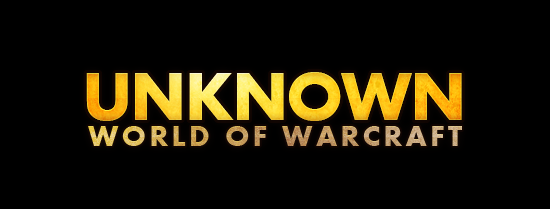
<style>
.page{position:relative;width:550px;height:209px;background:#000000}
.page>*{position:absolute;margin:0}
.t1{font:70px "Aharoni-Bold";letter-spacing:-0.03em;text-transform:uppercase}
.t2{font:30px "Aharoni-Bold";letter-spacing:0.11em;text-transform:uppercase}
</style>
<div class="page">
<p class="t1" style="left:86px;top:72px;width:376px;height:49px">Unknown</p>
<p class="t1" style="left:86px;top:72px;width:376px;height:49px">Unknown</p>
<p class="t1" style="left:86px;top:72px;width:376px;height:49px">Unknown</p>
<p class="t1" style="left:86px;top:72px;width:376px;height:49px">Unknown</p>
<p class="t1" style="left:86px;top:72px;width:376px;height:49px">Unknown</p>
<p class="t2" style="left:88px;top:126px;width:374px;height:20px">World of warcraft</p>
<p class="t2" style="left:88px;top:126px;width:374px;height:20px">World of warcraft</p>
<p class="t2" style="left:88px;top:126px;width:374px;height:20px">World of warcraft</p>
<p class="t2" style="left:88px;top:126px;width:374px;height:20px">World of warcraft</p>
</div>
